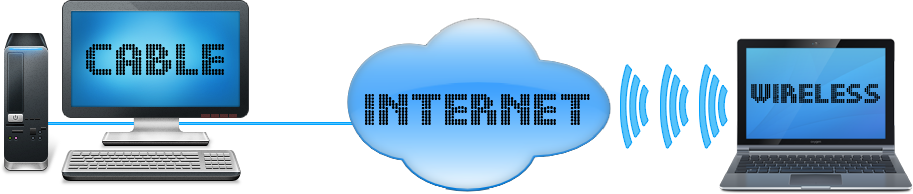
<style>
.page{position:relative;width:913px;height:194px;background:#ffffff}
.page>*{position:absolute;margin:0}
.t1{font:40px "DSDots-Medium";letter-spacing:0.015em;color:#000000}
.t2{font:24px "DSDots-Medium";letter-spacing:0.015em;color:#000000}
</style>
<div class="page">
<p class="t1" style="left:86px;top:44px;width:138px;height:31px">cable</p>
<p class="t2" style="left:751px;top:84px;width:129px;height:19px">wireless</p>
<p class="t1" style="left:365px;top:94px;width:225px;height:31px">Internet</p>
</div>
